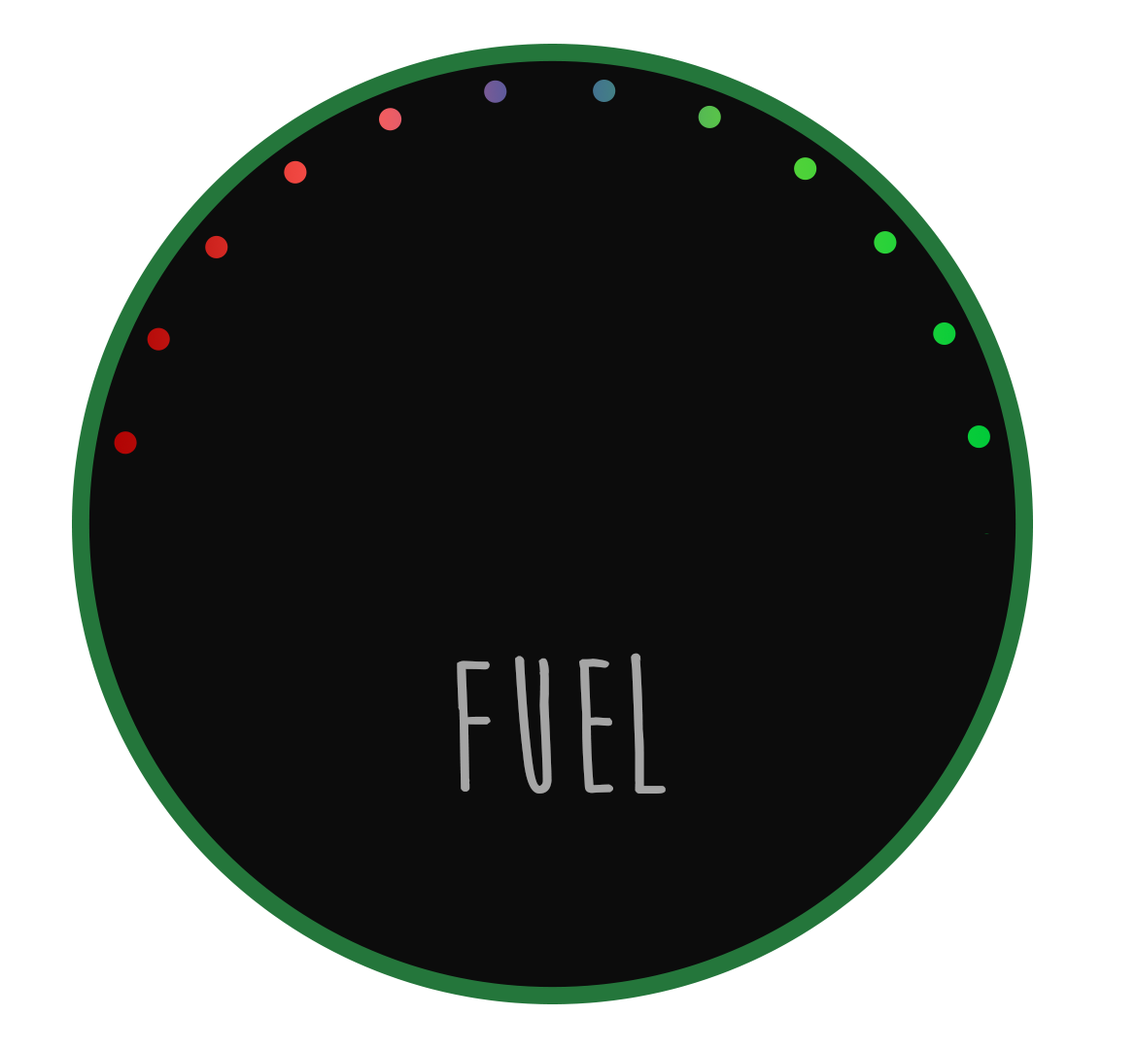
<style>
.page{position:relative;width:1137px;height:1049px;background:#0c0c0c}
.page>*{position:absolute;margin:0}
.t1{font:194.3px "MoonFlowerBold";color:#a5a5a5}
</style>
<div class="page">
<p class="t1" style="left:457px;top:653px;width:208px;height:141px">Fuel</p>
</div>
